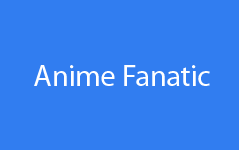
<style>
.page{position:relative;width:239px;height:150px;background:#317df0}
.page>*{position:absolute;margin:0}
.t1{font:30.2px "MyriadPro-Regular";color:#ffffff}
</style>
<div class="page">
<p class="t1" style="left:34px;top:65px;width:176px;height:21px">Anime Fanatic</p>
</div>
